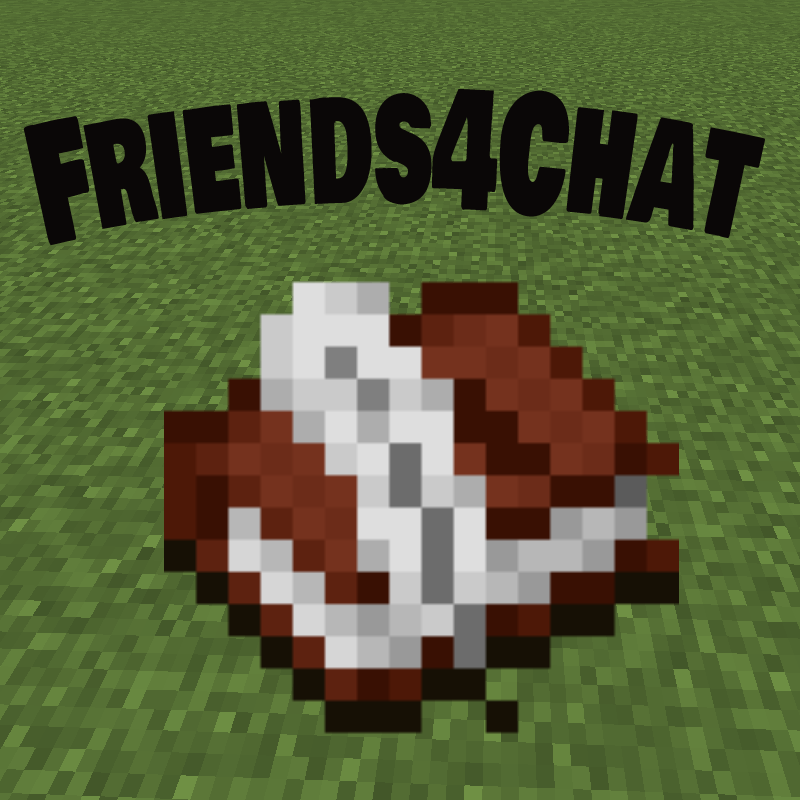
<style>
.page{position:relative;width:800px;height:800px}
.page>*{position:absolute;margin:0}
.t1{font:161.4px "BowlbyOneSC-Regular";color:#0a0707;scale:0.55 1}
</style>
<div class="page">
<p class="t1" style="left:23px;top:88px;width:743px;height:158px">Friends4Chat</p>
</div>
